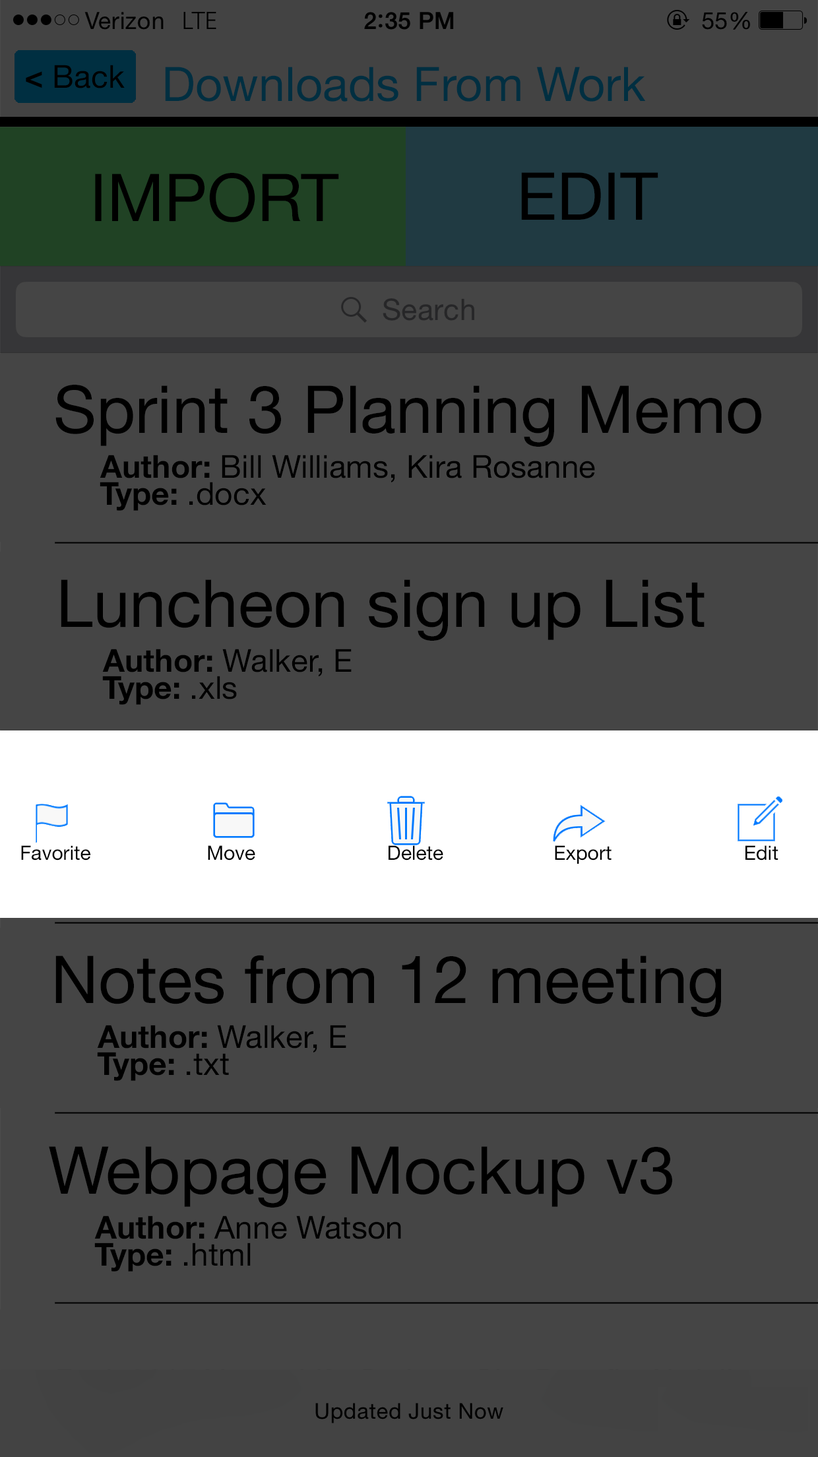
<style>
.page{position:relative;width:818px;height:1457px;background:#454545}
.page>*{position:absolute;margin:0}
.t1{font:31.7px "HelveticaNeue";color:#000000}
.t2{font:31.7px "HelveticaNeue-Bold";color:#000000}
.t3{font:47.5px "HelveticaNeue";color:#002f41}
.t4{font:66px "HelveticaNeue";color:#000000}
.t5{font:19.8px "HelveticaNeue";color:#000000}
</style>
<div class="page">
<p class="t1" style="left:26px;top:65px;width:99px;height:23px"><span class="t2">&lt;</span> Back</p>
<p class="t3" style="left:165px;top:67px;width:481px;height:35px">Downloads From Work</p>
<p class="t4" style="left:95px;top:173px;width:244px;height:49px">IMPORT</p>
<p class="t4" style="left:521px;top:172px;width:138px;height:48px">EDIT</p>
<p class="t4" style="left:55px;top:385px;width:707px;height:62px">Sprint 3 Planning Memo</p>
<p class="t1" style="left:100px;top:455px;width:495px;height:27px"><span class="t2">Author:</span> Bill Williams, Kira Rosanne</p>
<p class="t2" style="left:100px;top:482px;width:167px;height:29px">Type:<span class="t1"> .docx</span></p>
<p class="t4" style="left:61px;top:579px;width:644px;height:62px">Luncheon sign up List</p>
<p class="t1" style="left:102px;top:649px;width:250px;height:27px"><span class="t2">Author:</span> Walker, E</p>
<p class="t2" style="left:102px;top:676px;width:135px;height:29px">Type:<span class="t1"> .xls</span></p>
<p class="t5" style="left:21px;top:845px;width:758px;height:19px">Favorite                     Move                  Delete                    Export                        Edit</p>
<p class="t4" style="left:55px;top:955px;width:666px;height:62px">Notes from 12 meeting</p>
<p class="t1" style="left:97px;top:1025px;width:249px;height:28px"><span class="t2">Author:</span> Walker, E</p>
<p class="t2" style="left:97px;top:1052px;width:132px;height:29px">Type:<span class="t1"> .txt</span></p>
<p class="t4" style="left:49px;top:1146px;width:623px;height:62px">Webpage Mockup v3</p>
<p class="t1" style="left:94px;top:1216px;width:307px;height:23px"><span class="t2">Author:</span> Anne Watson</p>
<p class="t2" style="left:94px;top:1243px;width:157px;height:29px">Type:<span class="t1"> .html</span></p>
</div>
